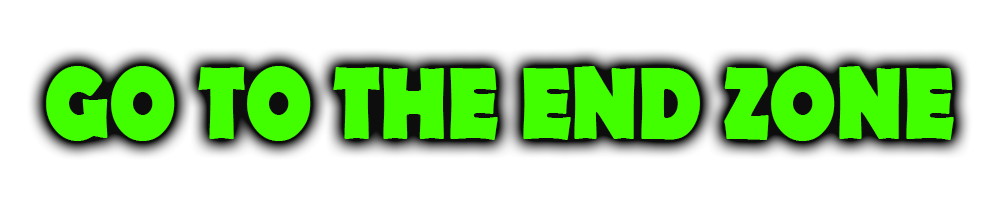
<style>
.page{position:relative;width:1000px;height:200px;background:#ffffff}
.page>*{position:absolute;margin:0}
.t1{font:103.8px "BerlinSansFB-Bold";color:#42ff00;scale:0.83 1}
</style>
<div class="page">
<p class="t1" style="left:46px;top:66px;width:908px;height:75px">GO TO THE END ZONE</p>
</div>
